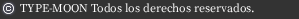
<style>
.page{position:relative;width:299px;height:19px;background:#333333}
.page>*{position:absolute;margin:0}
.t1{font:13px "OfficialFateFont-Medium";color:#ffffff}
</style>
<div class="page">
<p class="t1" style="left:20px;top:3px;width:234px;height:10px">TYPE-MOON Todos los derechos reservados.</p>
</div>
